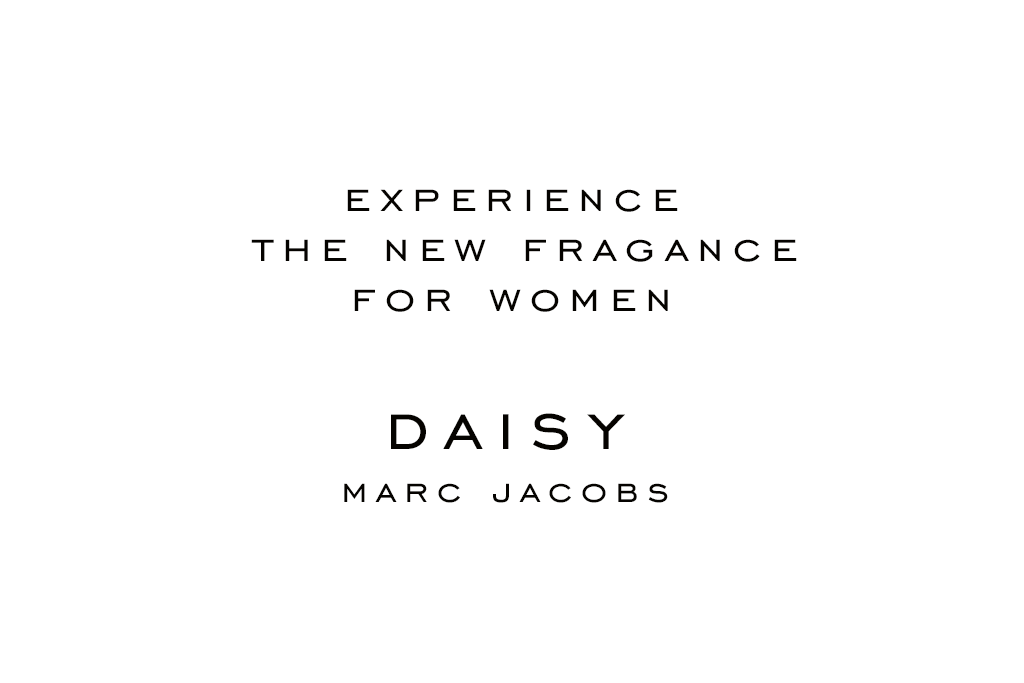
<style>
.page{position:relative;width:1024px;height:683px;background:#ffffff}
.page>*{position:absolute;margin:0}
.t1{font:51px/50px "EngraversGothicBT-Regular";letter-spacing:0.18em;color:#050300}
.t2{font:44px/53px "EngraversGothicBT-Regular";letter-spacing:0.18em;color:#050300}
.t3{font:83px/53px "EngraversGothicBT-Regular";letter-spacing:0.18em;color:#050300}
</style>
<div class="page">
<p class="t1" style="left:251px;top:189px;width:546px;height:123px;text-align:center">experience<br> the new fragance<br>for women</p>
<p class="t2" style="left:344px;top:413px;width:324px;height:90px;text-align:center"><span class="t3">daisy<br></span>marc jacobs</p>
</div>
